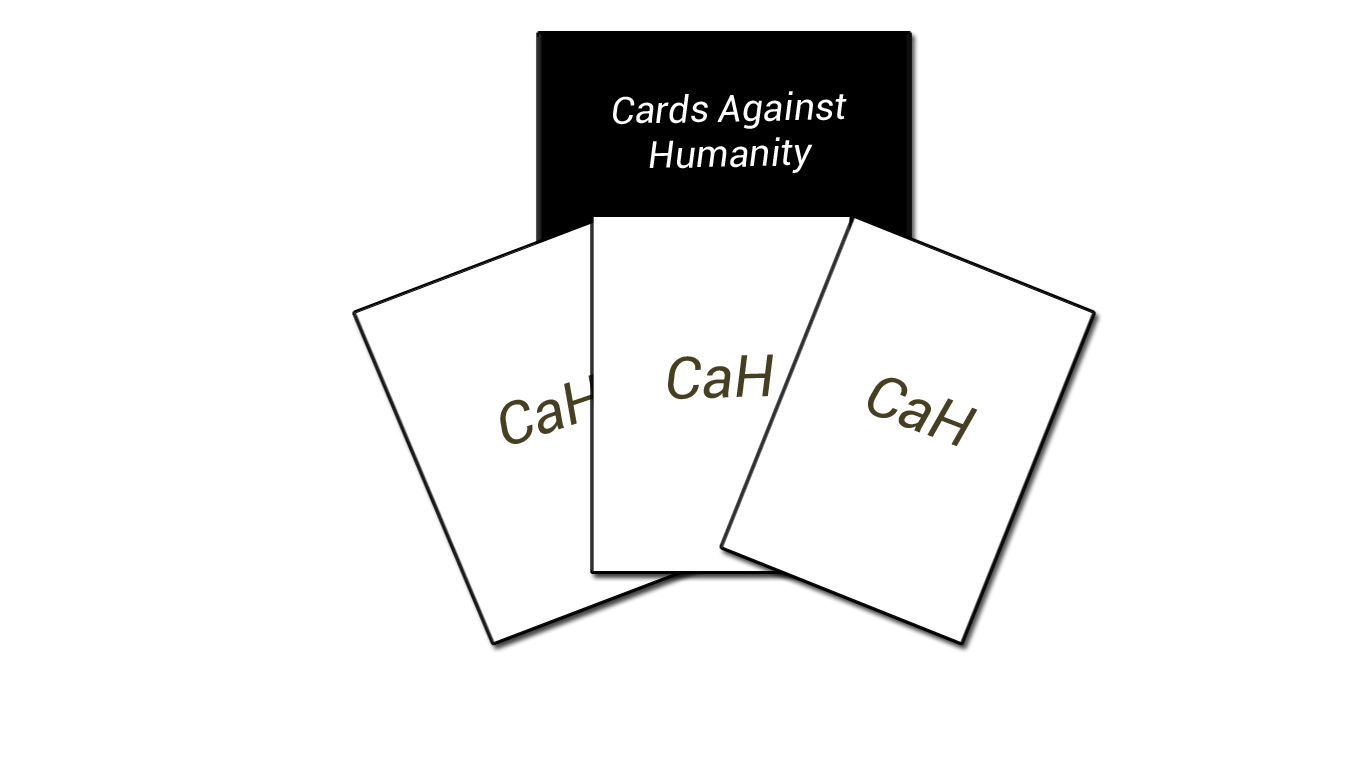
<style>
.page{position:relative;width:1366px;height:768px;background:#ffffff}
.page>*{position:absolute;margin:0}
.t1{font:37.5px "Roboto-Italic";color:#ffffff}
.t2{font:58.3px "Roboto-Italic";color:#463f22}
</style>
<div class="page">
<p class="t1" style="left:613px;top:91px;width:234px;height:82px;text-align:center;rotate:-1deg">Cards Against<br>Humanity</p>
<p class="t2" style="left:668px;top:354px;width:105px;height:46px;rotate:-2deg">CaH</p>
<p class="t2" style="left:500px;top:374px;width:101px;height:70px;rotate:-19deg">CaH</p>
<p class="t2" style="left:868px;top:377px;width:110px;height:70px;rotate:21deg">CaH</p>
</div>
